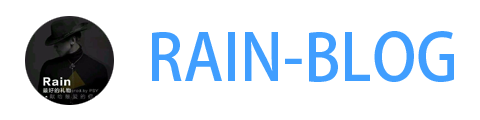
<style>
.page{position:relative;width:480px;height:120px;background:#ffffff}
.page>*{position:absolute;margin:0}
.t1{font:64.6px "AdobeHeitiStd-Regular";color:#409eff;scale:0.94 1}
</style>
<div class="page">
<p class="t1" style="left:152px;top:31px;width:302px;height:51px">RAIN-BLOG</p>
</div>
